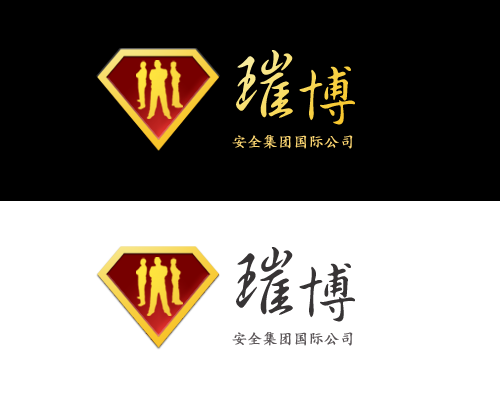
<style>
.page{position:relative;width:500px;height:400px;background:#000000}
.page>*{position:absolute;margin:0}
.t1{font:84px "HanWangShinSuMedium";letter-spacing:-0.16em}
.t2{font:68px "HanWangShinSuMedium";letter-spacing:-0.16em}
.t3{font:15px "KaiTi";color:#fbd571;font-weight:bold}
.t4{font:84px "HanWangShinSuMedium";letter-spacing:-0.16em;color:#373435}
.t5{font:68px "HanWangShinSuMedium";letter-spacing:-0.16em;color:#373435}
.t6{font:15px "KaiTi";color:#5b5658;font-weight:bold}
</style>
<div class="page">
<p class="t1" style="left:236px;top:50px;width:119px;height:75px">璀<span class="t2">博</span></p>
<p class="t3" style="left:232px;top:135px;width:121px;height:14px">安全集团国际公司</p>
<p class="t4" style="left:236px;top:247px;width:119px;height:75px">璀<span class="t5">博</span></p>
<p class="t6" style="left:232px;top:332px;width:121px;height:14px">安全集团国际公司</p>
</div>
